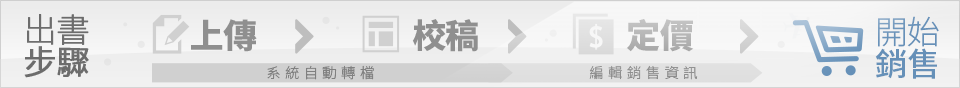
<style>
.page{position:relative;width:960px;height:88px}
.page>*{position:absolute;margin:0}
.t1{font:33.2px/31.7px "SourceHanSansTC-ExtraLight";letter-spacing:-0.02em;color:#6c6c6c;font-weight:bold}
.t2{font:33.2px/31.7px "SourceHanSansTC-Normal";letter-spacing:-0.02em;color:#6c6c6c;font-weight:bold}
.t3{font:32.6px/31.2px "SourceHanSansTC-Light";letter-spacing:-0.02em;color:#6590b8}
.t4{font:32.6px/31.2px "SourceHanSansTC-Medium";letter-spacing:-0.02em;color:#6590b8}
.t5{font:33.6px "SourceHanSansTC-Heavy";letter-spacing:-0.02em;color:#8f8f8f}
.t6{font:33.6px "SourceHanSansTC-Heavy";letter-spacing:-0.02em;color:#b7b7b7}
.t7{font:14.4px "SourceHanSansTC-Light";letter-spacing:0.3em;color:#808080}
.t8{font:14.4px "SourceHanSansTC-Light";letter-spacing:0.3em;color:#8f8f8f}
</style>
<div class="page">
<p class="t1" style="left:24px;top:14px;width:65px;height:64px">出書<br><span class="t2">步驟</span></p>
<p class="t3" style="left:875px;top:16px;width:64px;height:63px">開始<br><span class="t4">銷售</span></p>
<p class="t5" style="left:191px;top:19px;width:66px;height:33px">上傳</p>
<p class="t5" style="left:412px;top:19px;width:66px;height:33px">校稿</p>
<p class="t6" style="left:626px;top:19px;width:68px;height:33px">定價</p>
<p class="t7" style="left:267px;top:65px;width:107px;height:15px">系統自動轉檔</p>
<p class="t8" style="left:589px;top:65px;width:109px;height:15px">編輯銷售資訊</p>
</div>
